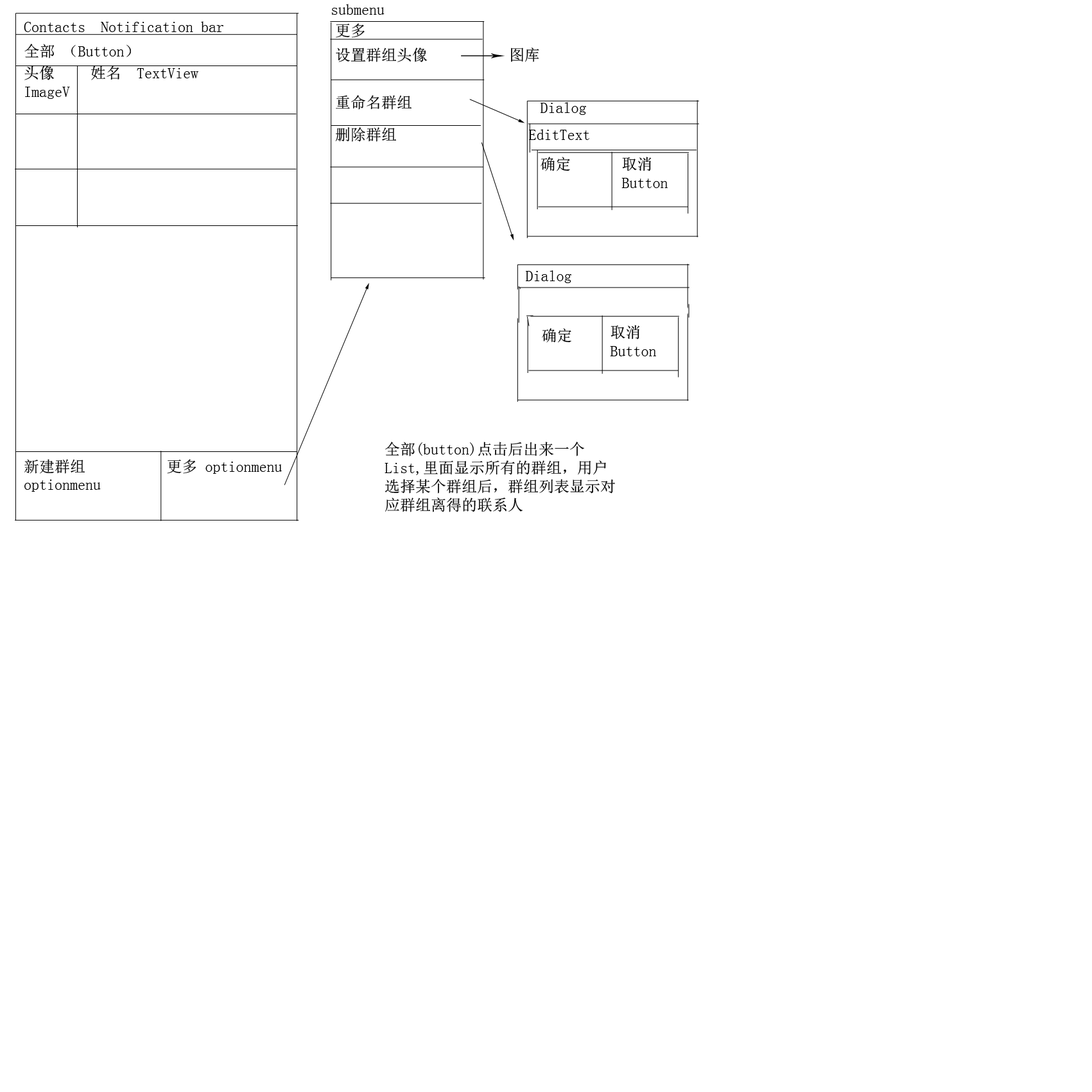
<style>
.page{position:relative;width:1092px;height:1092px;background:#ffffff}
.page>*{position:absolute;margin:0}
.t1{font:15.4px "SimSun";color:#000000}
</style>
<div class="page">
<p class="t1" style="left:331px;top:4px;width:54px;height:11px">submenu</p>
<p class="t1" style="left:24px;top:21px;width:199px;height:11px">Contacts  Notification bar</p>
<p class="t1" style="left:336px;top:23px;width:29px;height:15px">更多</p>
<p class="t1" style="left:24px;top:44px;width:107px;height:14px">全部 （Button）</p>
<p class="t1" style="left:336px;top:48px;width:92px;height:14px">设置群组头像</p>
<p class="t1" style="left:511px;top:48px;width:28px;height:14px">图库</p>
<p class="t1" style="left:24px;top:65px;width:46px;height:34px">头像<br>ImageView</p>
<p class="t1" style="left:91px;top:65px;width:107px;height:15px">姓名  TextView</p>
<p class="t1" style="left:336px;top:95px;width:76px;height:15px">重命名群组</p>
<p class="t1" style="left:541px;top:102px;width:45px;height:13px">Dialog</p>
<p class="t1" style="left:335px;top:127px;width:61px;height:15px">删除群组</p>
<p class="t1" style="left:529px;top:129px;width:60px;height:11px">EditText</p>
<p class="t1" style="left:541px;top:157px;width:29px;height:14px">确定</p>
<p class="t1" style="left:621px;top:157px;width:47px;height:31px">取消<br>Button</p>
<p class="t1" style="left:526px;top:270px;width:45px;height:13px">Dialog</p>
<p class="t1" style="left:542px;top:328px;width:29px;height:15px">确定</p>
<p class="t1" style="left:610px;top:325px;width:46px;height:31px">取消<br>Button</p>
<p class="t1" style="left:385px;top:442px;width:230px;height:70px">全部(button)点击后出来一个List,里面显示所有的群组，用户选择某个群组后，群组列表显示对应群组离得的联系人</p>
<p class="t1" style="left:24px;top:459px;width:77px;height:33px">新建群组  optionmenu</p>
<p class="t1" style="left:167px;top:459px;width:115px;height:15px">更多 optionmenu</p>
</div>
